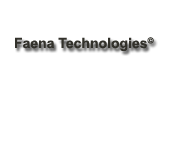
<style>
.page{position:relative;width:184px;height:159px;background:#ffffff}
.page>*{position:absolute;margin:0}
.t1{font:14px "Arial-BoldMT";color:#32312b}
</style>
<div class="page">
<p class="t1" style="left:15px;top:37px;width:139px;height:14px">Faena Technologies©</p>
</div>
